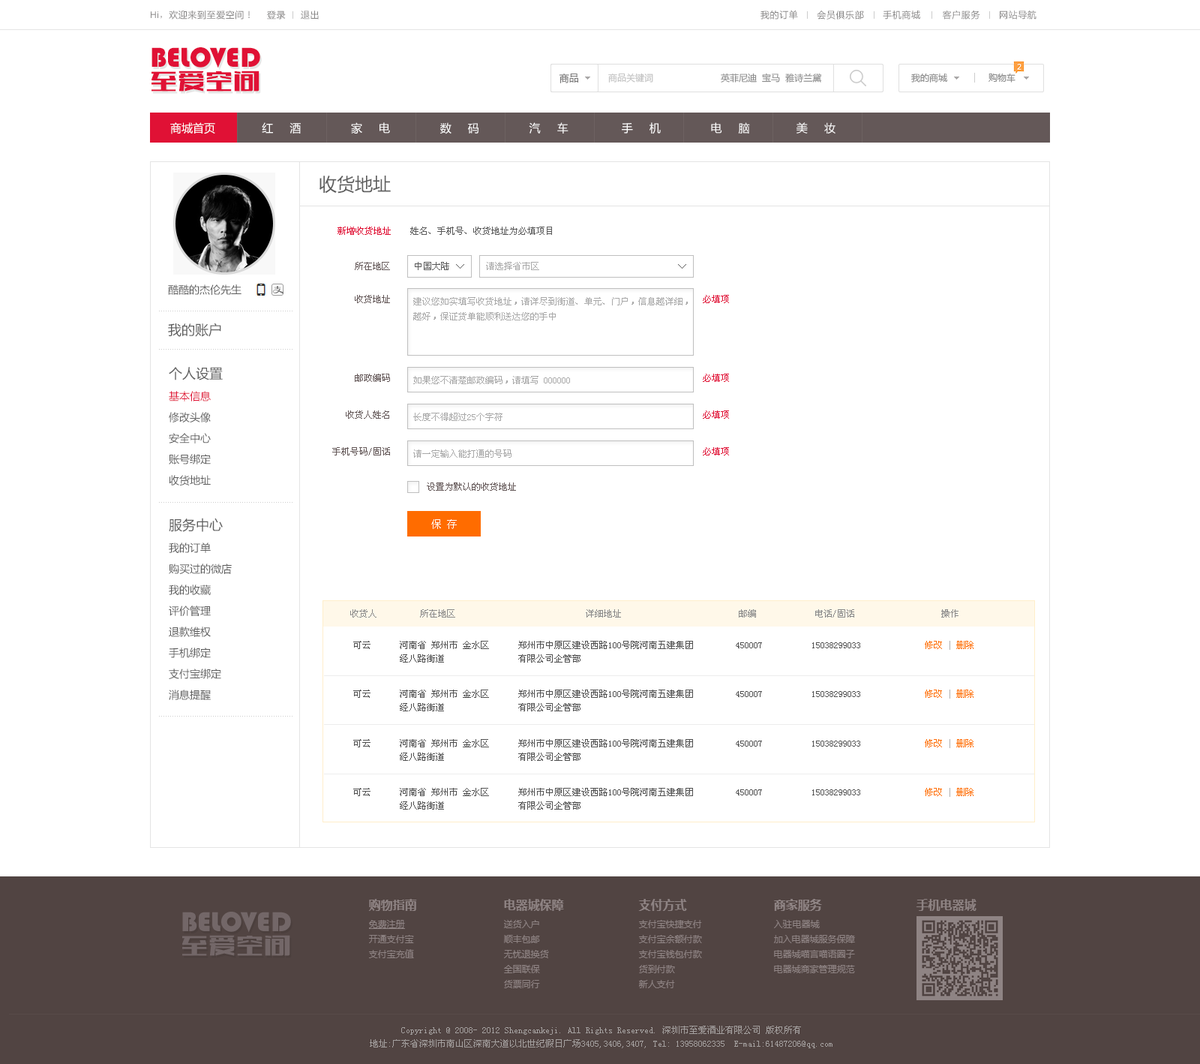
<style>
.page{position:relative;width:1200px;height:1064px;background:#ffffff}
.page>*{position:absolute;margin:0}
.t1{font:9px "MicrosoftYaHei";letter-spacing:0.05em;color:#858484}
.t2{font:9px "ArialMT";letter-spacing:0.05em;color:#858484}
.t3{font:9px "SimSun";letter-spacing:0.05em;color:#858484}
.t4{font:28.5px "Bauhaus93";color:#e01135}
.t5{font:27px "FZCTHJW--GB1-0";letter-spacing:0.025em;color:#e01135}
.t6{font:9.8px "MicrosoftYaHei";color:#7a7979}
.t7{font:9px "MicrosoftYaHei";color:#c4c4c4}
.t8{font:9px "MicrosoftYaHei";color:#8e8e8e}
.t9{font:11.2px "MicrosoftYaHei";color:#ffffff}
.t10{font:18px "MicrosoftYaHei";color:#5d5d5d}
.t11{font:9px "SimSun";color:#e01135}
.t12{font:9px "SimSun";color:#5b5b5b}
.t13{font:9px "SimSun";color:#645858}
.t14{font:9px "SimSun";color:#a8a8a8}
.t15{font:10.5px "MicrosoftYaHei";color:#5d5d5d}
.t16{font:9px/15px "SimSun";color:#a9a9a9}
.t17{font:13.5px "MicrosoftYaHei";color:#5d5d5d}
.t18{font:10.5px/21px "MicrosoftYaHei";color:#5d5d5d}
.t19{font:13.5px/24px "MicrosoftYaHei";color:#5d5d5d}
.t20{font:10.5px/21px "MicrosoftYaHei";color:#e01135}
.t21{font:9px "SimSun";color:#a9a9a9}
.t22{font:10.5px "SimSun";color:#ffffff}
.t23{font:9px "SimSun";color:#898989}
.t24{font:9px "SimSun";color:#505050}
.t25{font:9px/13.5px "SimSun";color:#505050}
.t26{font:9px "SimSun";color:#ff6c00}
.t27{font:9px "SimSun";color:#afafaf}
.t28{font:9px/13.5px "SimSun";color:#a4a09f}
</style>
<div class="page">
<p class="t1" style="left:151px;top:10px;width:99px;height:10px"><span class="t2">Hi</span><span class="t3">，</span>欢迎来到至爱空间！</p>
<p class="t1" style="left:267px;top:10px;width:19px;height:10px">登录</p>
<p class="t1" style="left:301px;top:10px;width:18px;height:10px">退出</p>
<p class="t1" style="left:760px;top:10px;width:276px;height:10px">我的订单      会员俱乐部      手机商城       客户服务      网站导航</p>
<p class="t4" style="left:152px;top:47px;width:108px;height:21px">BELOVED</p>
<p class="t5" style="left:152px;top:70px;width:108px;height:22px">至爱空间</p>
<p class="t6" style="left:559px;top:74px;width:19px;height:9px">商品</p>
<p class="t7" style="left:608px;top:73px;width:45px;height:9px">商品关键词</p>
<p class="t8" style="left:721px;top:73px;width:101px;height:9px">英菲尼迪  宝马  雅诗兰黛</p>
<p class="t8" style="left:911px;top:74px;width:36px;height:8px">我的商城</p>
<p class="t8" style="left:988px;top:73px;width:28px;height:9px">购物车</p>
<p class="t9" style="left:170px;top:122px;width:666px;height:12px">商城首页              红     酒               家     电               数     码               汽     车                手     机               电     脑              美     妆</p>
<p class="t10" style="left:320px;top:176px;width:71px;height:18px">收货地址</p>
<p class="t11" style="left:338px;top:226px;width:53px;height:9px">新增收货地址</p>
<p class="t12" style="left:410px;top:226px;width:142px;height:9px">姓名、手机号、收货地址为必填项目</p>
<p class="t13" style="left:355px;top:262px;width:35px;height:8px">所在地区</p>
<p class="t12" style="left:415px;top:262px;width:34px;height:8px">中国大陆</p>
<p class="t14" style="left:486px;top:262px;width:53px;height:8px">请选择省市区</p>
<p class="t15" style="left:168px;top:284px;width:74px;height:11px">酷酷的杰伦先生</p>
<p class="t13" style="left:355px;top:295px;width:35px;height:8px">收货地址</p>
<p class="t16" style="left:413px;top:297px;width:275px;height:23px;text-align:justify">建议您如实填写收货地址，请详尽到街道、单元、门户，信息越详细，<br>越好，保证货单能顺利送达您的手中</p>
<p class="t11" style="left:703px;top:295px;width:26px;height:8px">必填项</p>
<p class="t17" style="left:168px;top:322px;width:53px;height:15px">我的账户</p>
<p class="t18" style="left:169px;top:367px;width:54px;height:118px;text-align:justify"><span class="t19">个人设置<br></span><span class="t20">基本信息<br></span>修改头像<br>安全中心<br>账号绑定<br>收货地址</p>
<p class="t13" style="left:355px;top:374px;width:35px;height:8px">邮政编码</p>
<p class="t21" style="left:413px;top:376px;width:157px;height:8px">如果您不清楚邮政编码，请填写 000000</p>
<p class="t11" style="left:703px;top:374px;width:26px;height:8px">必填项</p>
<p class="t13" style="left:346px;top:410px;width:43px;height:8px">收货人姓名</p>
<p class="t21" style="left:413px;top:412px;width:89px;height:9px">长度不得超过25个字符</p>
<p class="t11" style="left:703px;top:410px;width:26px;height:8px">必填项</p>
<p class="t13" style="left:332px;top:447px;width:58px;height:8px">手机号码/固话</p>
<p class="t21" style="left:413px;top:449px;width:99px;height:9px">请一定输入能打通的号码</p>
<p class="t11" style="left:703px;top:447px;width:26px;height:8px">必填项</p>
<p class="t13" style="left:427px;top:482px;width:89px;height:8px">设置为默认的收货地址</p>
<p class="t18" style="left:169px;top:518px;width:63px;height:182px;text-align:justify"><span class="t19">服务中心<br></span>我的订单<br>购买过的微店<br>我的收藏<br>评价管理<br>退款维权<br>手机绑定<br>支付宝绑定<br>消息提醒</p>
<p class="t22" style="left:431px;top:519px;width:26px;height:10px">保 存</p>
<p class="t23" style="left:350px;top:609px;width:26px;height:8px">收货人</p>
<p class="t23" style="left:420px;top:609px;width:35px;height:8px">所在地区</p>
<p class="t23" style="left:586px;top:609px;width:35px;height:8px">详细地址</p>
<p class="t23" style="left:739px;top:609px;width:17px;height:8px">邮编</p>
<p class="t23" style="left:815px;top:609px;width:39px;height:8px">电话/固话</p>
<p class="t23" style="left:941px;top:609px;width:17px;height:8px">操作</p>
<p class="t24" style="left:353px;top:640px;width:17px;height:9px">可云</p>
<p class="t25" style="left:400px;top:640px;width:89px;height:22px;text-align:justify">河南省 郑州市 金水区<br>经八路街道</p>
<p class="t25" style="left:518px;top:640px;width:175px;height:22px;text-align:justify">郑州市中原区建设西路100号院河南五建集团<br>有限公司企管部</p>
<p class="t26" style="left:925px;top:640px;width:49px;height:10px">修改 <span class="t27">|</span> 删除</p>
<p class="t24" style="left:736px;top:642px;width:26px;height:6px">450007</p>
<p class="t24" style="left:812px;top:642px;width:48px;height:6px">15038299033</p>
<p class="t24" style="left:353px;top:689px;width:17px;height:9px">可云</p>
<p class="t25" style="left:400px;top:689px;width:89px;height:22px;text-align:justify">河南省 郑州市 金水区<br>经八路街道</p>
<p class="t25" style="left:518px;top:689px;width:175px;height:22px;text-align:justify">郑州市中原区建设西路100号院河南五建集团<br>有限公司企管部</p>
<p class="t26" style="left:925px;top:689px;width:49px;height:9px">修改 <span class="t27">|</span> 删除</p>
<p class="t24" style="left:736px;top:691px;width:26px;height:6px">450007</p>
<p class="t24" style="left:812px;top:691px;width:48px;height:6px">15038299033</p>
<p class="t24" style="left:353px;top:739px;width:17px;height:8px">可云</p>
<p class="t25" style="left:400px;top:739px;width:89px;height:21px;text-align:justify">河南省 郑州市 金水区<br>经八路街道</p>
<p class="t25" style="left:518px;top:739px;width:175px;height:21px;text-align:justify">郑州市中原区建设西路100号院河南五建集团<br>有限公司企管部</p>
<p class="t24" style="left:736px;top:740px;width:26px;height:6px">450007</p>
<p class="t24" style="left:812px;top:740px;width:48px;height:6px">15038299033</p>
<p class="t26" style="left:925px;top:739px;width:49px;height:9px">修改 <span class="t27">|</span> 删除</p>
<p class="t24" style="left:353px;top:788px;width:17px;height:8px">可云</p>
<p class="t25" style="left:400px;top:788px;width:89px;height:21px;text-align:justify">河南省 郑州市 金水区<br>经八路街道</p>
<p class="t25" style="left:518px;top:788px;width:175px;height:21px;text-align:justify">郑州市中原区建设西路100号院河南五建集团<br>有限公司企管部</p>
<p class="t24" style="left:736px;top:789px;width:26px;height:6px">450007</p>
<p class="t24" style="left:812px;top:789px;width:48px;height:6px">15038299033</p>
<p class="t26" style="left:925px;top:788px;width:49px;height:8px">修改 <span class="t27">|</span> 删除</p>
<p class="t28" style="left:370px;top:1025px;width:462px;height:23px;text-align:center">Copyright @ 2008- 2012 Shengcankeji. All Rights Reserved. 深圳市至爱酒业有限公司 版权所有<br>地址:广东省深圳市南山区深南大道以北世纪假日广场3405,3406,3407, Tel: 13958062335  E-mail:61487206@qq.com</p>
</div>
